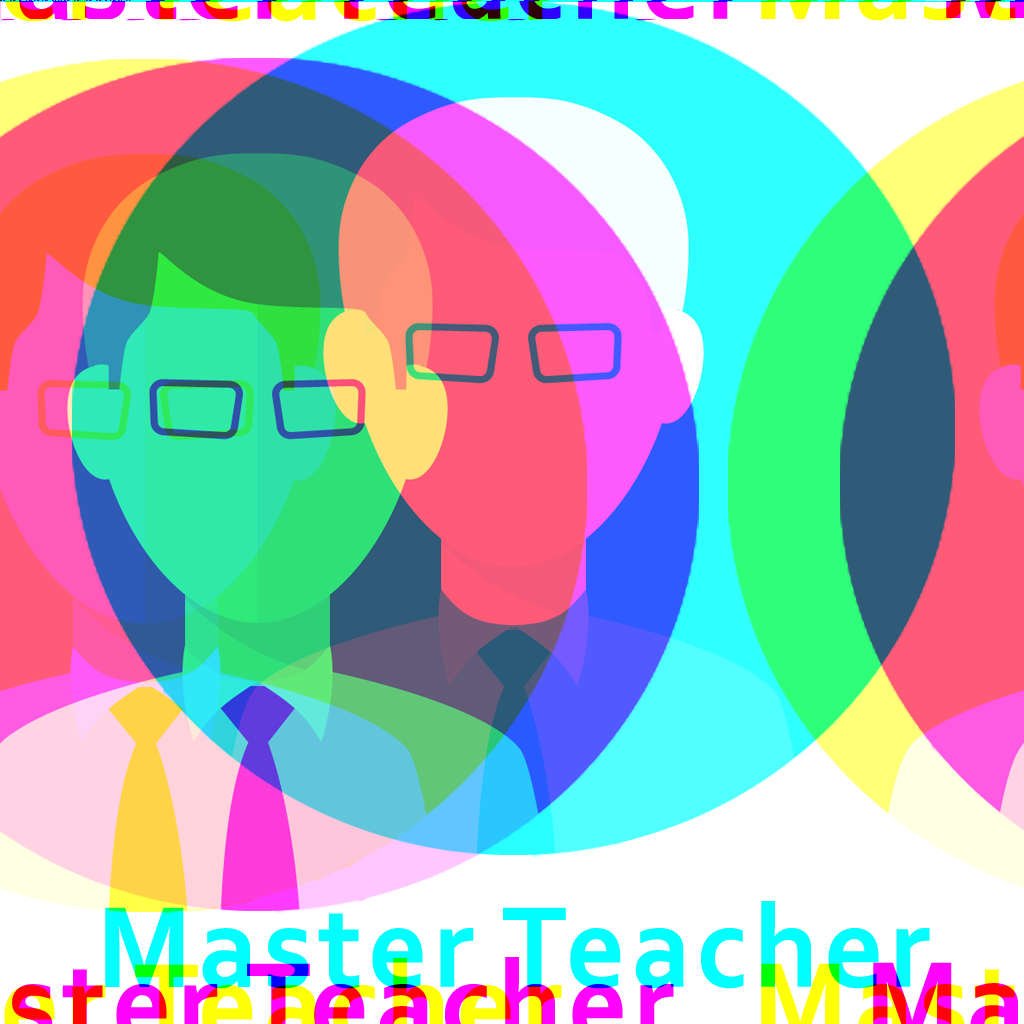
<style>
.page{position:relative;width:1024px;height:1024px}
.page>*{position:absolute;margin:0}
.t1{font:120.8px "Corbel-Bold";letter-spacing:0.05em;color:#00ffff;scale:0.96 1}
</style>
<div class="page">
<p class="t1" style="left:105px;top:899px;width:825px;height:88px">Master Teacher</p>
</div>
